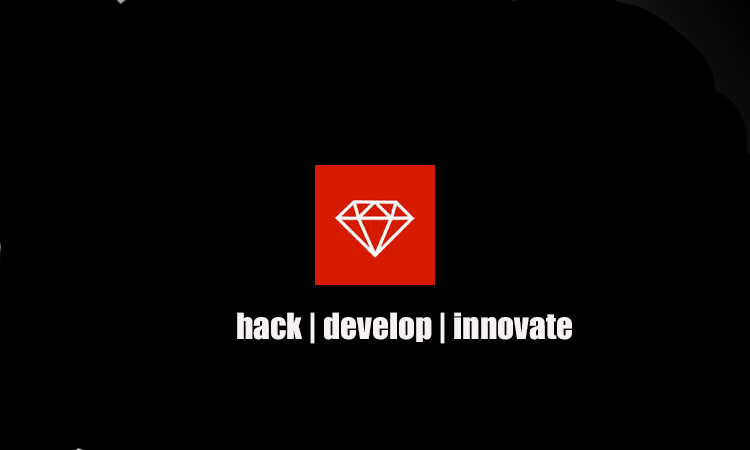
<style>
.page{position:relative;width:750px;height:450px;background:#000000}
.page>*{position:absolute;margin:0}
.t1{font:12px "Impact";color:#f7f2f2}
</style>
<div class="page">
<p class="t1" style="left:237px;top:312px;width:335px;height:32px">hack | develop | innovate</p>
</div>
